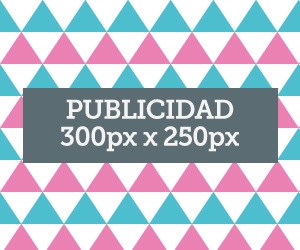
<style>
.page{position:relative;width:300px;height:250px;background:#ffffff}
.page>*{position:absolute;margin:0}
.t1{font:27px/27px "MuseoSlab-700";letter-spacing:-0.04em;color:#f3f3f1}
</style>
<div class="page">
<p class="t1" style="left:60px;top:99px;width:179px;height:53px;text-align:center">PUBLICIDAD<br>300px x 250px</p>
</div>
